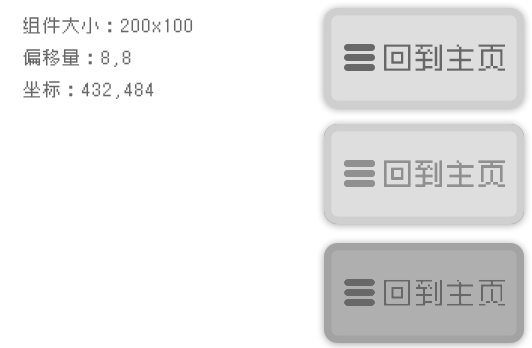
<style>
.page{position:relative;width:532px;height:348px;background:#ffffff}
.page>*{position:absolute;margin:0}
.t1{font:17.7px/31.8px "Zpix";color:#676767}
.t2{font:28.6px "Zpix";color:#676767}
.t3{font:28.6px "Zpix";color:#909090}
</style>
<div class="page">
<p class="t1" style="left:23px;top:17px;width:170px;height:83px">组件大小：200x100<br>偏移量：8,8<br>坐标：432,484</p>
<p class="t2" style="left:384px;top:44px;width:121px;height:27px">回到主页</p>
<p class="t3" style="left:384px;top:160px;width:121px;height:27px">回到主页</p>
<p class="t2" style="left:384px;top:279px;width:121px;height:27px">回到主页</p>
</div>
